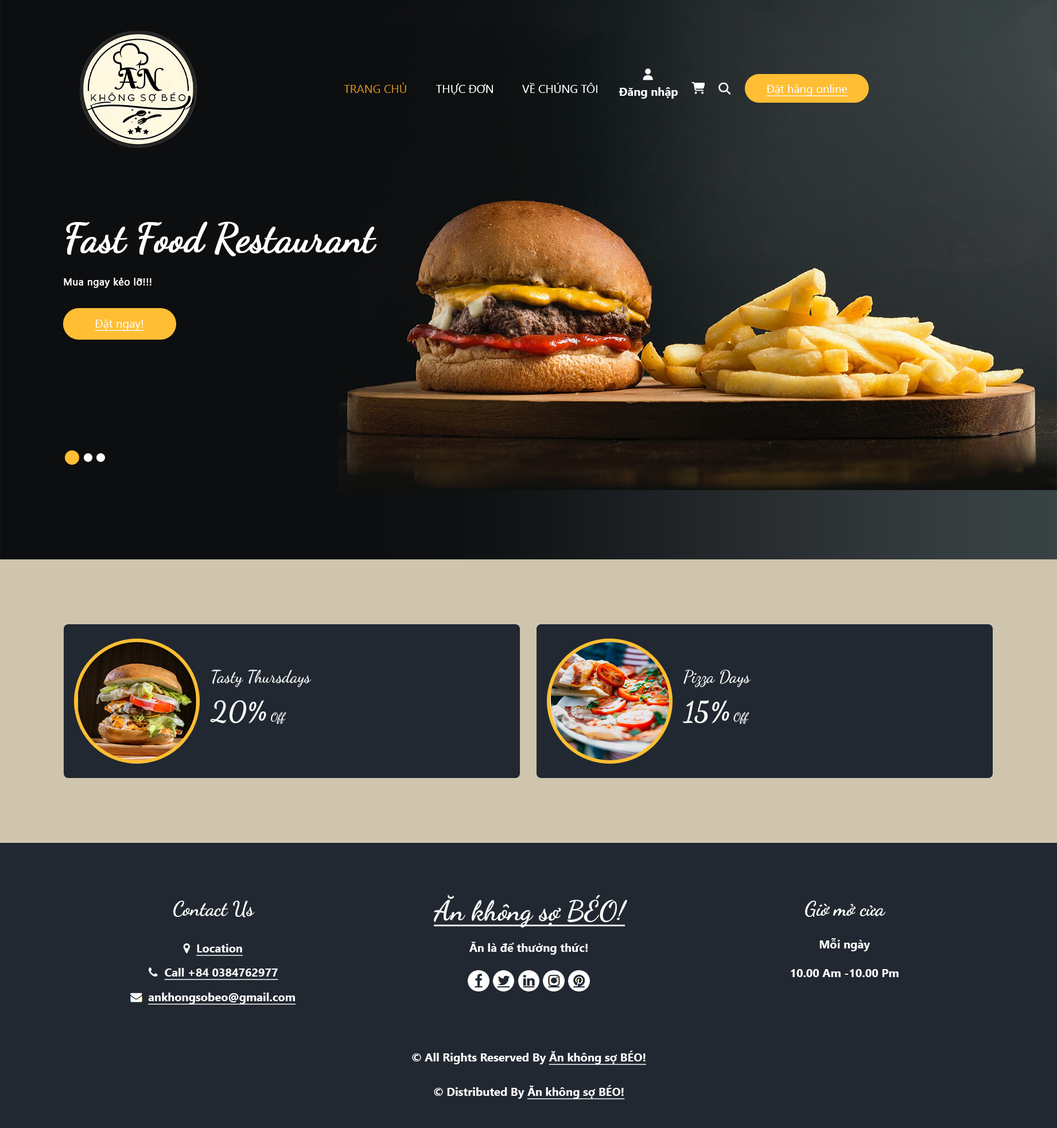
<style>
.page{position:relative;width:1057px;height:1128px;background:#222831}
.page>*{position:absolute;margin:0}
.t1{font:11.5px "SegoeUI";color:#d18a19}
.t2{font:11.5px "SegoeUI";color:#ffffff}
.t3{font:11.5px "SegoeUI-Bold";color:#ffffff}
.t4{font:11.5px "SegoeUI";color:#ffffff;text-decoration:underline}
.t5{font:40.2px "DancingScript-Regular";letter-spacing:-0.02em;color:#ffffff;font-weight:bold}
.t6{font:9.8px "SegoeUI";letter-spacing:0.023em;color:#ffffff;font-weight:bold}
.t7{font:17.2px "DancingScript-Regular";color:#ffffff}
.t8{font:28.1px "DancingScript-Bold";color:#ffffff}
.t9{font:11.5px "DancingScript-Regular";color:#ffffff}
.t10{font:20.1px "DancingScript-Bold";color:#ffffff}
.t11{font:27.5px "DancingScript-Bold";color:#ffffff;text-decoration:underline}
.t12{font:11.5px "SegoeUI-Bold";color:#ffffff;text-decoration:underline}
</style>
<div class="page">
<p class="t1" style="left:344px;top:83px;width:62px;height:10px">TRANG CHỦ</p>
<p class="t2" style="left:436px;top:83px;width:57px;height:12px">THỰC ĐƠN</p>
<p class="t2" style="left:522px;top:83px;width:75px;height:10px">VỀ CHÚNG TÔI</p>
<p class="t3" style="left:619px;top:87px;width:59px;height:12px">Đăng nhập</p>
<p class="t4" style="left:766px;top:84px;width:82px;height:12px">Đặt hàng online</p>
<p class="t5" style="left:66px;top:221px;width:311px;height:36px">Fast Food Restaurant</p>
<p class="t6" style="left:64px;top:278px;width:87px;height:10px">Mua ngay kẻo lỡ!!!</p>
<p class="t4" style="left:95px;top:320px;width:49px;height:11px">Đặt ngay!</p>
<p class="t7" style="left:212px;top:670px;width:100px;height:17px">Tasty Thursdays</p>
<p class="t7" style="left:683px;top:670px;width:68px;height:17px">Pizza Days</p>
<p class="t8" style="left:210px;top:700px;width:76px;height:24px">20% <span class="t9">Off</span></p>
<p class="t8" style="left:682px;top:700px;width:67px;height:24px">15% <span class="t9">Off</span></p>
<p class="t10" style="left:173px;top:900px;width:82px;height:18px">Contact Us</p>
<p class="t11" style="left:434px;top:895px;width:193px;height:33px">Ăn không sợ BÉO!</p>
<p class="t10" style="left:805px;top:900px;width:80px;height:18px">Giờ mở cửa</p>
<p class="t3" style="left:469px;top:942px;width:119px;height:13px">Ăn là để thưởng thức!</p>
<p class="t3" style="left:819px;top:938px;width:51px;height:13px">Mỗi ngày</p>
<p class="t12" style="left:196px;top:944px;width:47px;height:12px">Location</p>
<p class="t12" style="left:164px;top:968px;width:114px;height:12px">Call +84 0384762977</p>
<p class="t3" style="left:791px;top:969px;width:108px;height:8px">10.00 Am -10.00 Pm</p>
<p class="t12" style="left:148px;top:993px;width:148px;height:12px">ankhongsobeo@gmail.com</p>
<p class="t3" style="left:412px;top:1051px;width:234px;height:14px">© All Rights Reserved By <span class="t12">Ăn không sợ BÉO!</span></p>
<p class="t3" style="left:434px;top:1085px;width:191px;height:14px">© Distributed By <span class="t12">Ăn không sợ BÉO!</span></p>
</div>
